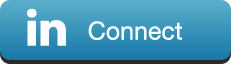
<style>
.page{position:relative;width:231px;height:64px}
.page>*{position:absolute;margin:0}
.t1{font:25px "HelveticaNeue";color:#ffffff}
</style>
<div class="page">
<p class="t1" style="left:88px;top:21px;width:94px;height:19px">Connect</p>
</div>
